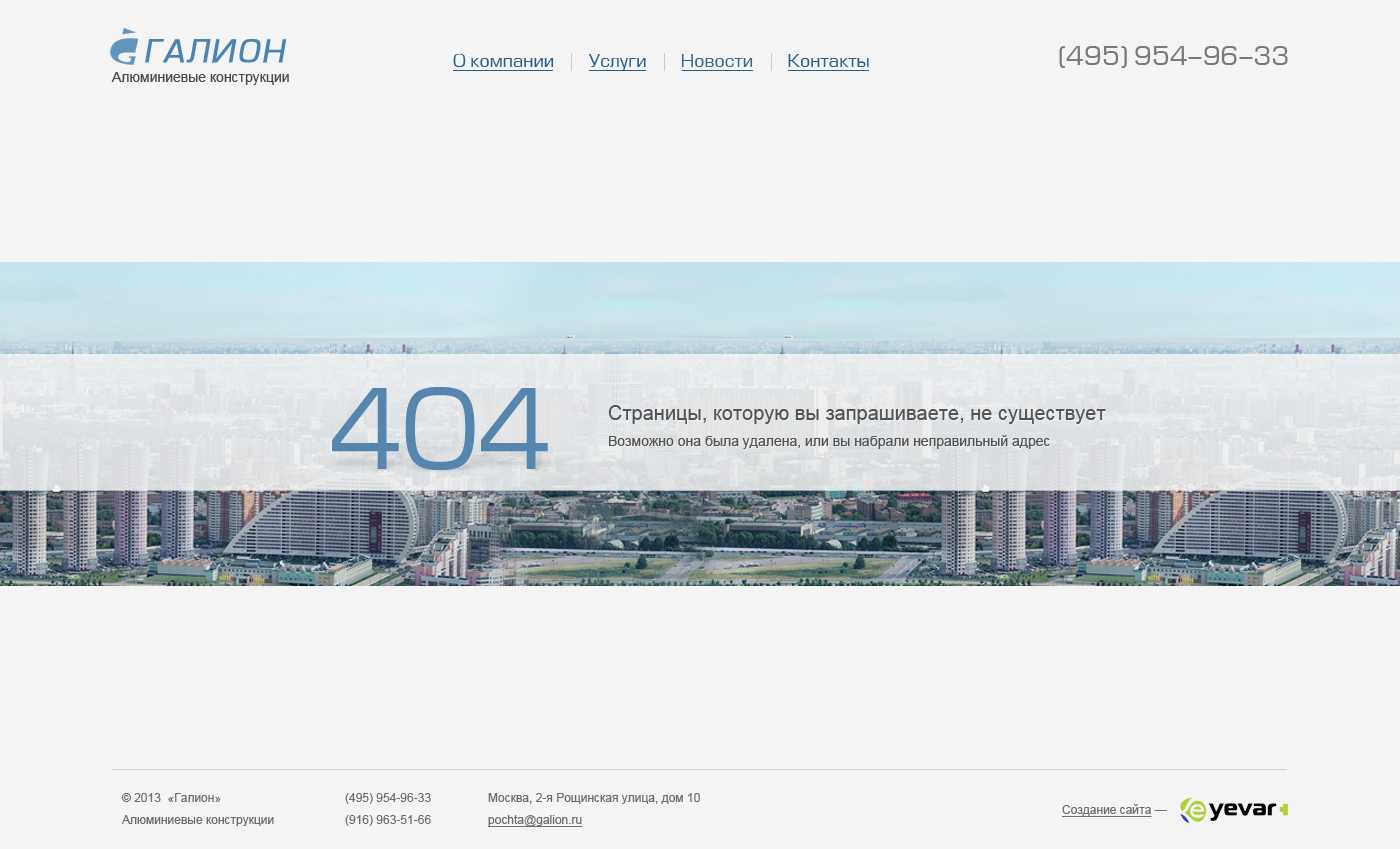
<style>
.page{position:relative;width:1400px;height:849px;background:#f4f4f4}
.page>*{position:absolute;margin:0}
.t1{font:30px "Europe-Italic";letter-spacing:0.06em;color:#4a84b3;font-weight:bold}
.t2{font:18px "EuropeNormal";color:#275e8b}
.t3{font:18px "EuropeNormal";color:#356892}
.t4{font:26px "EuropeNormal";color:#797979}
.t5{font:14px "ArialMT";color:#4b4b4b}
.t6{font:14px/26px "ArialMT";color:#545454}
.t7{font:20px/26px "ArialMT";color:#545454}
.t8{font:12px/22px "ArialMT";color:#6d6d6d}
.t9{font:12px/22px "ArialMT";color:#6d6d6d;text-decoration:underline}
.t10{font:12px "ArialMT";color:#6d6d6d;text-decoration:underline}
.t11{font:12px "ArialMT";color:#6d6d6d}
</style>
<div class="page">
<p class="t1" style="left:145px;top:39px;width:142px;height:24px">ГАЛИОН</p>
<p class="t2" style="left:453px;top:54px;width:416px;height:17px">О компании        Услуги        <span class="t3">Новости</span>        Контакты</p>
<p class="t4" style="left:1059px;top:46px;width:229px;height:22px">(495) 954-96-33</p>
<p class="t5" style="left:111px;top:72px;width:178px;height:13px">Алюминиевые конструкции</p>
<p class="t6" style="left:608px;top:405px;width:498px;height:44px"><span class="t7">Страницы, которую вы запрашиваете, не существует<br></span>Возможно она была удалена, или вы набрали неправильный адрес</p>
<p class="t8" style="left:121px;top:793px;width:153px;height:33px">© 2013  «Галион»<br>Алюминиевые конструкции</p>
<p class="t8" style="left:345px;top:793px;width:86px;height:33px">(495) 954-96-33<br>(916) 963-51-66</p>
<p class="t8" style="left:488px;top:793px;width:212px;height:34px">Москва, 2-я Рощинская улица, дом 10<br><span class="t9">pochta@galion.ru</span></p>
<p class="t10" style="left:1062px;top:804px;width:105px;height:13px">Создание сайта<span class="t11"> —</span></p>
</div>
